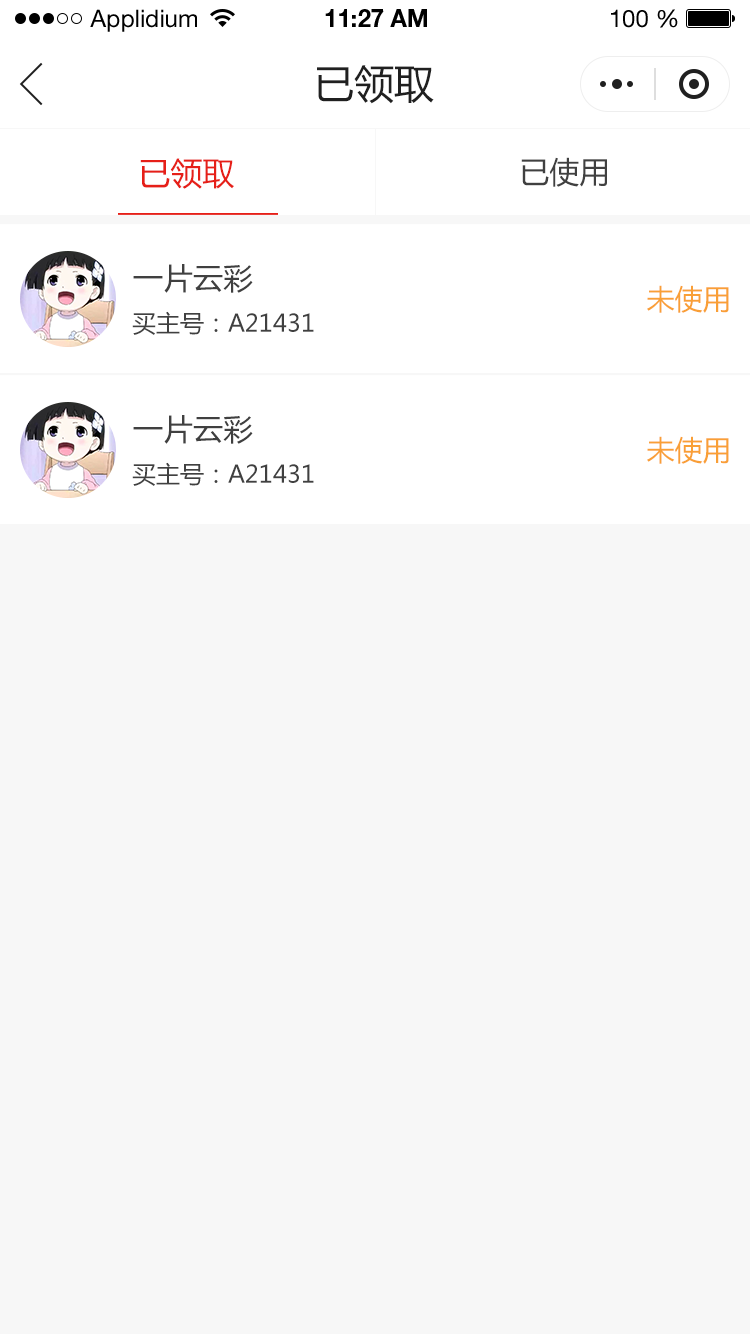
<style>
.page{position:relative;width:750px;height:1334px;background:#f7f7f7}
.page>*{position:absolute;margin:0}
.t1{font:24px "HelveticaNeueLTStd-Roman";color:#000000}
.t2{font:24px "HelveticaNeueLTStd-Bd";color:#000000}
.t3{font:40px "MicrosoftYaHei";color:#202020;text-transform:uppercase}
.t4{font:32px "MicrosoftYaHei";color:#e61f18;text-transform:uppercase}
.t5{font:30px "MicrosoftYaHei";color:#404040;text-transform:uppercase}
.t6{font:28px "MicrosoftYaHei";color:#f99f36;text-transform:uppercase}
.t7{font:24px "MicrosoftYaHei";color:#404040;text-transform:uppercase}
</style>
<div class="page">
<p class="t1" style="left:90px;top:9px;width:107px;height:23px">Applidium</p>
<p class="t2" style="left:325px;top:9px;width:102px;height:18px">11:27 AM</p>
<p class="t1" style="left:611px;top:9px;width:67px;height:19px">100 %</p>
<p class="t3" style="left:317px;top:65px;width:117px;height:39px">已领取</p>
<p class="t4" style="left:140px;top:158px;width:94px;height:31px">已领取</p>
<p class="t5" style="left:521px;top:157px;width:86px;height:30px">已使用</p>
<p class="t5" style="left:133px;top:264px;width:120px;height:29px">一片云彩</p>
<p class="t6" style="left:647px;top:285px;width:82px;height:28px">未使用</p>
<p class="t7" style="left:132px;top:311px;width:182px;height:24px">买主号：A21431</p>
<p class="t5" style="left:133px;top:415px;width:120px;height:29px">一片云彩</p>
<p class="t6" style="left:647px;top:436px;width:82px;height:28px">未使用</p>
<p class="t7" style="left:132px;top:462px;width:182px;height:24px">买主号：A21431</p>
</div>
